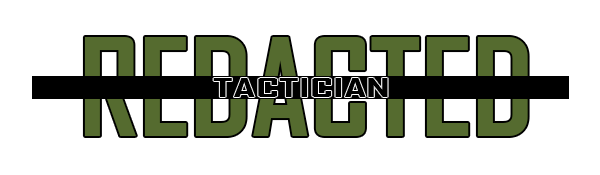
<style>
.page{position:relative;width:600px;height:175px;background:#ffffff}
.page>*{position:absolute;margin:0}
.t1{font:130px "AgencyFB-Bold";color:#556b2f;text-transform:uppercase}
.t2{font:24.9px "AgencyFB-Bold";color:#000000;text-transform:uppercase;scale:2.02 1}
</style>
<div class="page">
<p class="t1" style="left:84px;top:37px;width:444px;height:99px">redacted</p>
<p class="t2" style="left:213px;top:78px;width:175px;height:19px">Tactician</p>
</div>
